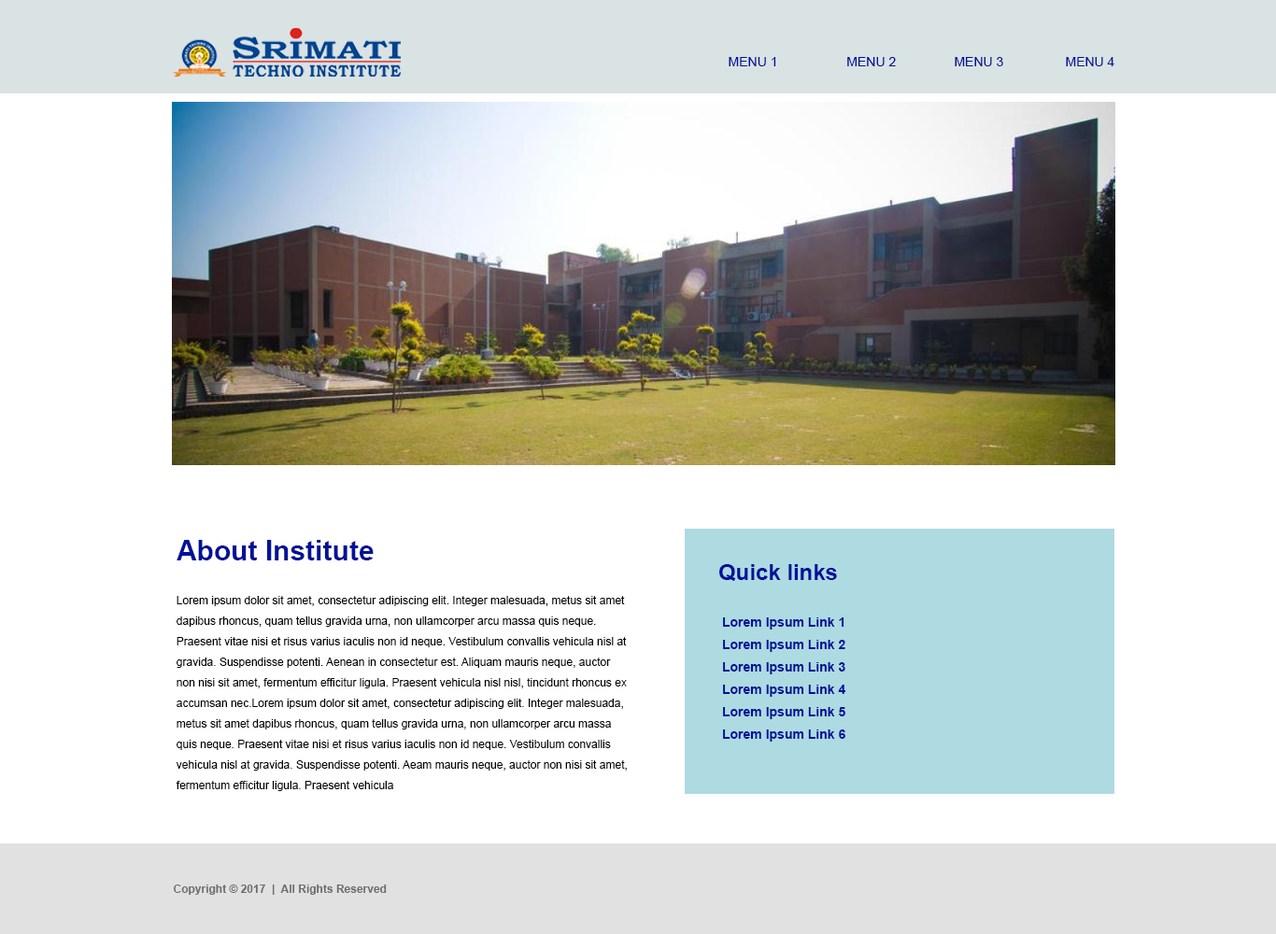
<style>
.page{position:relative;width:1276px;height:934px;background:#ffffff}
.page>*{position:absolute;margin:0}
.t1{font:13.1px "ArialMT";color:#001297}
.t2{font:28px "Arial-BoldMT";color:#001297}
.t3{font:22.4px "Arial-BoldMT";color:#001297}
.t4{font:11.2px/20.6px "ArialMT";color:#000000}
.t5{font:13.1px/22.4px "Arial-BoldMT";color:#001297}
.t6{font:11.2px "Arial-BoldMT";color:#6e6e6e}
</style>
<div class="page">
<p class="t1" style="left:729px;top:57px;width:386px;height:9px">MENU 1                   MENU 2                MENU 3                 MENU 4</p>
<p class="t2" style="left:177px;top:540px;width:197px;height:21px">About Institute</p>
<p class="t3" style="left:719px;top:564px;width:118px;height:17px">Quick links</p>
<p class="t4" style="left:176px;top:596px;width:451px;height:195px">Lorem ipsum dolor sit amet, consectetur adipiscing elit. Integer malesuada, metus sit amet dapibus rhoncus, quam tellus gravida urna, non ullamcorper arcu massa quis neque. Praesent vitae nisi et risus varius iaculis non id neque. Vestibulum convallis vehicula nisl at gravida. Suspendisse potenti. Aenean in consectetur est. Aliquam mauris neque, auctor non nisi sit amet, fermentum efficitur ligula. Praesent vehicula nisl nisl, tincidunt rhoncus ex accumsan nec.Lorem ipsum dolor sit amet, consectetur adipiscing elit. Integer malesuada, metus sit amet dapibus rhoncus, quam tellus gravida urna, non ullamcorper arcu massa quis neque. Praesent vitae nisi et risus varius iaculis non id neque. Vestibulum convallis vehicula nisl at gravida. Suspendisse potenti. Aeam mauris neque, auctor non nisi sit amet, fermentum efficitur ligula. Praesent vehicula</p>
<p class="t5" style="left:723px;top:618px;width:123px;height:124px">Lorem Ipsum Link 1<br>Lorem Ipsum Link 2<br>Lorem Ipsum Link 3<br>Lorem Ipsum Link 4<br>Lorem Ipsum Link 5<br>Lorem Ipsum Link 6</p>
<p class="t6" style="left:174px;top:885px;width:213px;height:10px">Copyright © 2017  |  All Rights Reserved</p>
</div>
